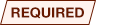
<style>
.page{position:relative;width:125px;height:25px;background:#fff3ee}
.page>*{position:absolute;margin:0}
.t1{font:14px "HelveticaNeueLTStd-Bd";color:#681900}
</style>
<div class="page">
<p class="t1" style="left:11px;top:7px;width:73px;height:12px">REQUIRED</p>
</div>
